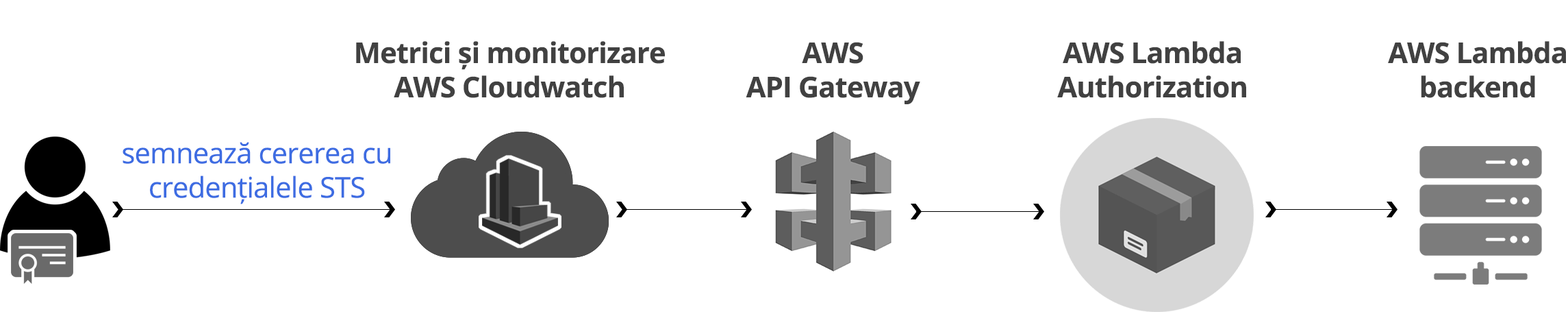
<style>
.page{position:relative;width:1568px;height:312px;background:#ffffff}
.page>*{position:absolute;margin:0}
.t1{font:28.5px/34.2px "OpenSans-Bold";letter-spacing:-0.02em;color:#414141}
.t2{font:28.5px/34.2px "OpenSans";letter-spacing:-0.02em;color:#3d6ce2}
</style>
<div class="page">
<p class="t1" style="left:356px;top:41px;width:309px;height:57px;text-align:center">Metrici și monitorizare <br>AWS Cloudwatch</p>
<p class="t1" style="left:746px;top:42px;width:174px;height:62px;text-align:center">AWS <br>API Gateway</p>
<p class="t1" style="left:1057px;top:41px;width:189px;height:57px;text-align:center">AWS Lambda <br>Authorization</p>
<p class="t1" style="left:1388px;top:41px;width:178px;height:57px;text-align:center">AWS Lambda <br>backend</p>
<p class="t2" style="left:123px;top:142px;width:267px;height:62px;text-align:center">semnează cererea cu<br>credențialele STS</p>
</div>
